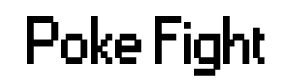
<style>
.page{position:relative;width:281px;height:82px;background:#ffffff}
.page>*{position:absolute;margin:0}
.t1{font:62.5px "Small Fonts";color:#000000;font-weight:bold}
</style>
<div class="page">
<p class="t1" style="left:27px;top:16px;width:238px;height:60px">Poke Fight</p>
</div>
